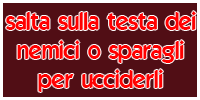
<style>
.page{position:relative;width:200px;height:100px;background:#510e15}
.page>*{position:absolute;margin:0}
.t1{font:24px "ELEGANCE";color:#ff0000}
</style>
<div class="page">
<p class="t1" style="left:6px;top:11px;width:190px;height:81px;text-align:center">salta sulla testa dei<br>nemici o sparagli<br>per ucciderli</p>
</div>
